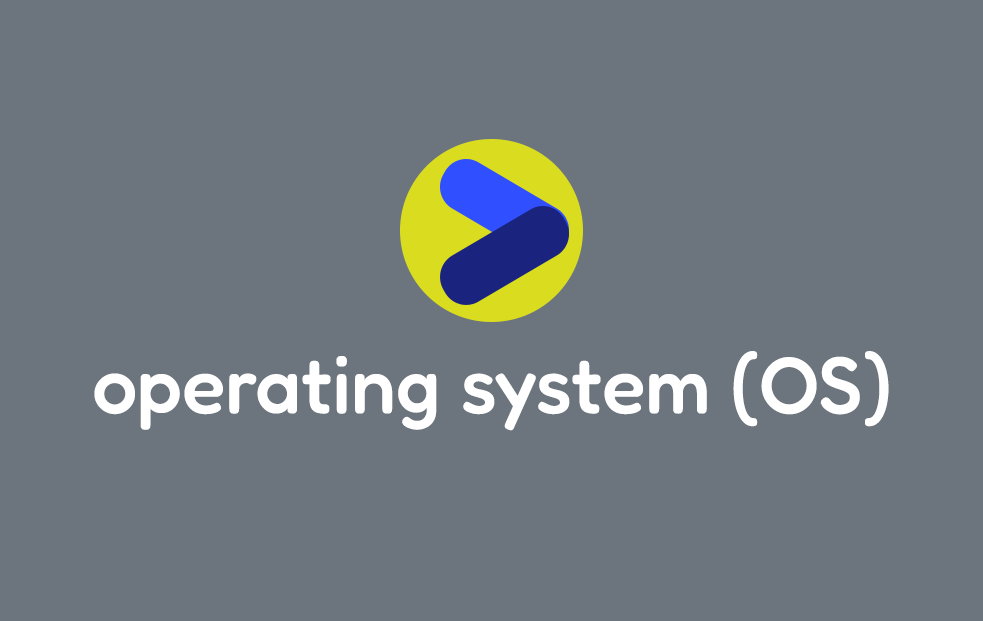
<style>
.page{position:relative;width:983px;height:621px;background:#6c757d}
.page>*{position:absolute;margin:0}
.t1{font:80px "Fredoka-Medium";color:#ffffff}
</style>
<div class="page">
<p class="t1" style="left:94px;top:351px;width:795px;height:80px">operating system (OS)</p>
</div>
